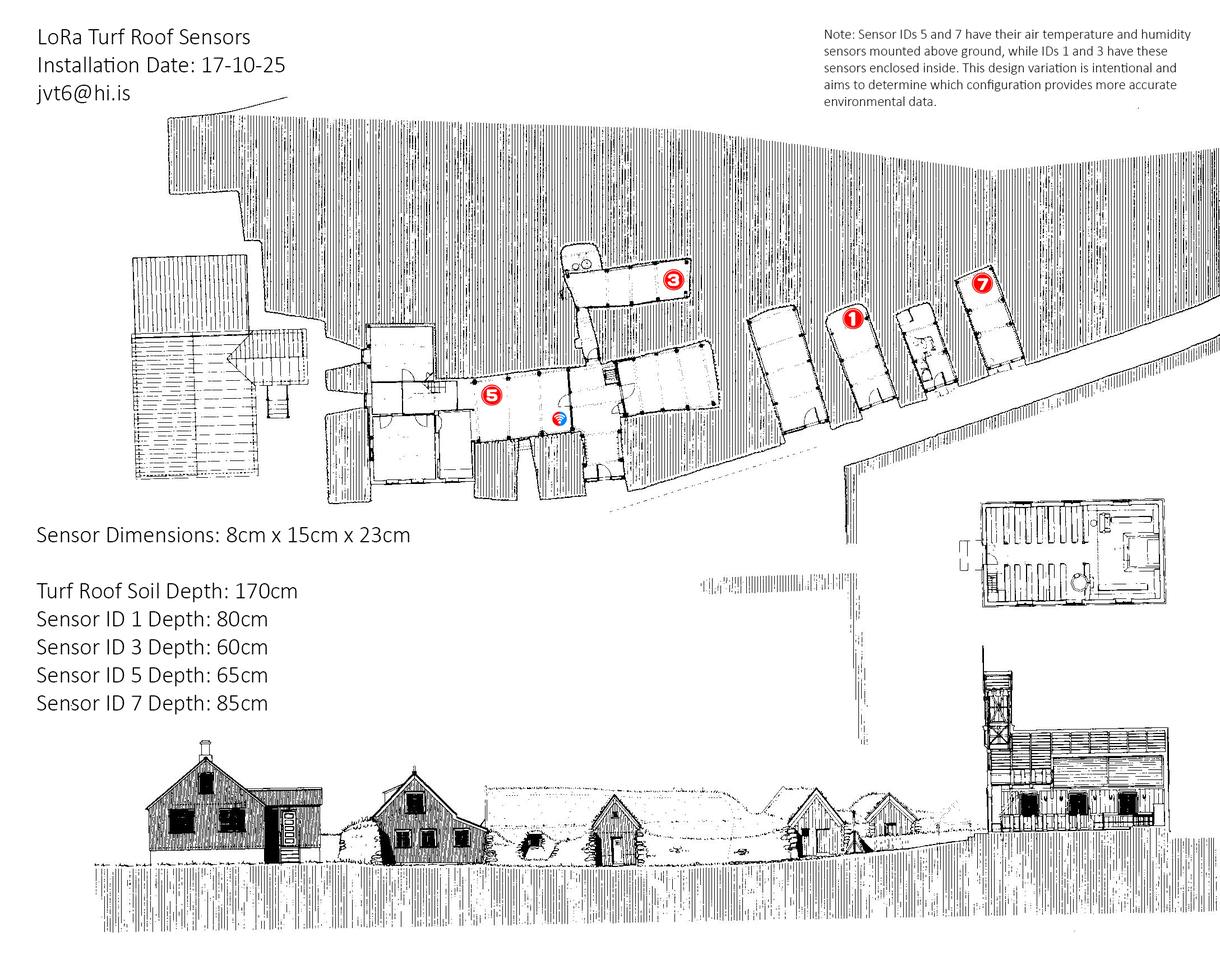
<style>
.page{position:relative;width:1220px;height:978px;background:#ffffff}
.page>*{position:absolute;margin:0}
.t1{font:23.4px "Calibri-Light";color:#000000}
.t2{font:14px "Calibri-Light";color:#000000}
</style>
<div class="page">
<p class="t1" style="left:36px;top:29px;width:249px;height:75px">LoRa Turf Roof Sensors<br>Installation Date: 17-10-25<br>jvt6@hi.is</p>
<p class="t2" style="left:824px;top:29px;width:367px;height:77px">Note: Sensor IDs 5 and 7 have their air temperature and humidity<br>sensors mounted above ground, while IDs 1 and 3 have these<br>sensors enclosed inside. This design variation is intentional and<br>aims to determine which configuration provides more accurate<br>environmental data.</p>
<p class="t1" style="left:36px;top:527px;width:373px;height:187px">Sensor Dimensions: 8cm x 15cm x 23cm<br><br>Turf Roof Soil Depth: 170cm<br>Sensor ID 1 Depth: 80cm<br>Sensor ID 3 Depth: 60cm<br>Sensor ID 5 Depth: 65cm<br>Sensor ID 7 Depth: 85cm</p>
</div>
